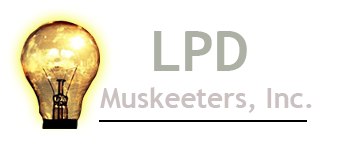
<style>
.page{position:relative;width:337px;height:143px;background:#ffffff}
.page>*{position:absolute;margin:0}
.t1{font:55.6px "TrebuchetMS-Bold";color:#adb0a4}
.t2{font:27.8px "TrebuchetMS-Bold";color:#cbc1c1}
</style>
<div class="page">
<p class="t1" style="left:154px;top:31px;width:93px;height:40px">LPD</p>
<p class="t2" style="left:100px;top:87px;width:212px;height:26px">Muskeeters, Inc.</p>
</div>
